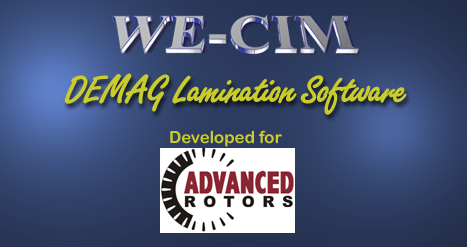
<style>
.page{position:relative;width:471px;height:250px}
.page>*{position:absolute;margin:0}
.t1{font:41.7px "FreestyleScriptBoldPlain";color:#cacc2c}
.t2{font:16.7px "ArialRoundedMTBold";color:#cacc2c}
</style>
<div class="page">
<p class="t1" style="left:64px;top:73px;width:343px;height:42px">DEMAG Lamination Software</p>
<p class="t2" style="left:170px;top:130px;width:112px;height:17px">Developed for</p>
</div>
